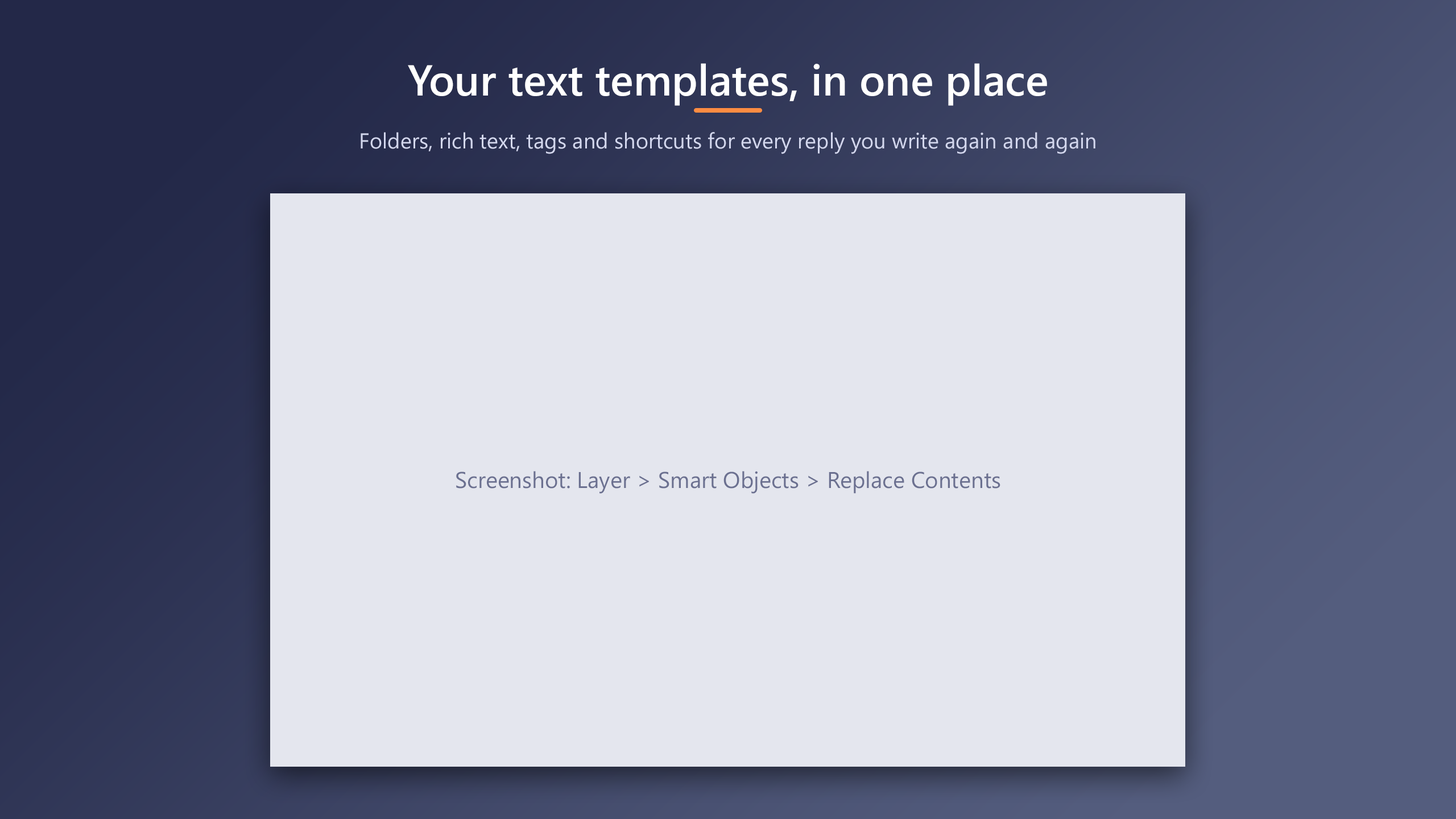
<style>
.page{position:relative;width:1456px;height:819px;background:#e4e6ee}
.page>*{position:absolute;margin:0}
.t1{font:43.2px "SegoeUI-Semibold";color:#ffffff}
.t2{font:21.6px "SegoeUI";color:#d3d7ee}
</style>
<div class="page">
<p class="t1" style="left:408px;top:63px;width:639px;height:43px">Your text templates, in one place</p>
<p class="t2" style="left:361px;top:132px;width:734px;height:22px">Folders, rich text, tags and shortcuts for every reply you write again and again</p>
</div>
